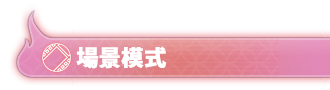
<style>
.page{position:relative;width:330px;height:90px;background:#ffffff}
.page>*{position:absolute;margin:0}
.t1{font:22px "SourceHanSansCN-Heavy";color:#ffffff;font-weight:bold}
</style>
<div class="page">
<p class="t1" style="left:76px;top:46px;width:91px;height:23px">場景模式</p>
</div>
